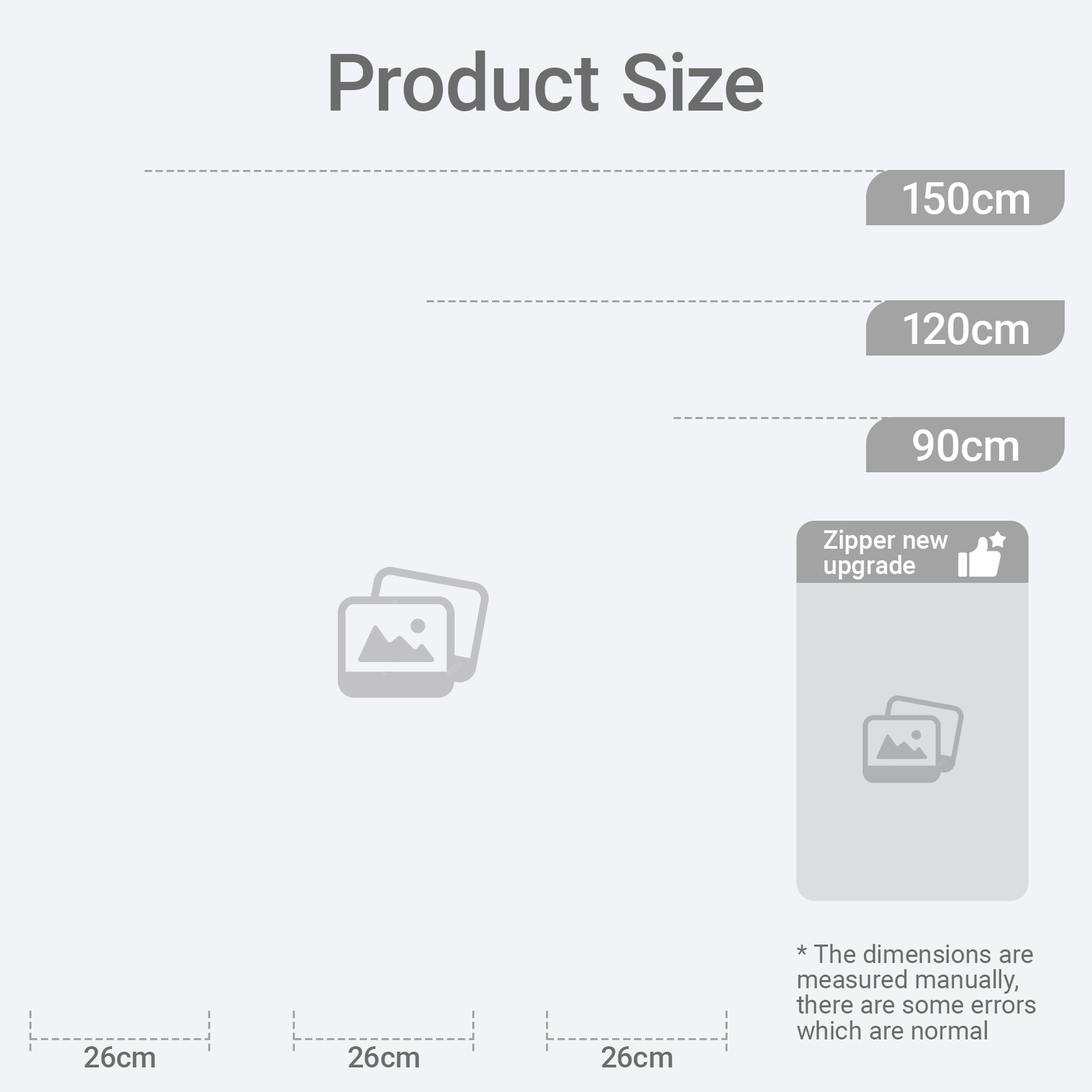
<style>
.page{position:relative;width:1092px;height:1092px;background:#f2f3f6}
.page>*{position:absolute;margin:0}
.t1{font:80.1px "Roboto-Medium";color:#6c6c6c}
.t2{font:43.7px "Roboto-Medium";color:#ffffff}
.t3{font:25.5px/25.5px "Roboto-Medium";color:#fffefe}
.t4{font:25.5px/25.5px "Roboto-Regular";color:#6c6c6c}
.t5{font:29.1px "Roboto-Medium";color:#6c6c6c}
</style>
<div class="page">
<p class="t1" style="left:330px;top:51px;width:434px;height:60px">Product Size</p>
<p class="t2" style="left:904px;top:182px;width:125px;height:32px">150cm</p>
<p class="t2" style="left:904px;top:313px;width:125px;height:32px">120cm</p>
<p class="t2" style="left:912px;top:429px;width:106px;height:32px">90cm</p>
<p class="t3" style="left:824px;top:530px;width:124px;height:49px">Zipper new<br>upgrade</p>
<p class="t4" style="left:796px;top:944px;width:240px;height:95px">* The dimensions are measured manually, there are some errors which are normal</p>
<p class="t5" style="left:84px;top:1046px;width:71px;height:21px">26cm</p>
<p class="t5" style="left:348px;top:1046px;width:71px;height:21px">26cm</p>
<p class="t5" style="left:601px;top:1046px;width:71px;height:21px">26cm</p>
</div>
